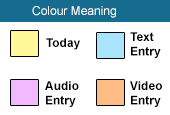
<style>
.page{position:relative;width:170px;height:115px;background:#ffffff}
.page>*{position:absolute;margin:0}
.t1{font:12px "ArialMT";color:#ffffff}
.t2{font:12px "Arial-BoldMT";color:#000000}
</style>
<div class="page">
<p class="t1" style="left:32px;top:6px;width:84px;height:12px">Colour Meaning</p>
<p class="t2" style="left:46px;top:38px;width:34px;height:12px">Today</p>
<p class="t2" style="left:130px;top:32px;width:31px;height:26px">Text<br>Entry</p>
<p class="t2" style="left:45px;top:81px;width:34px;height:26px">Audio<br>Entry</p>
<p class="t2" style="left:130px;top:81px;width:32px;height:26px">Video<br>Entry</p>
</div>
